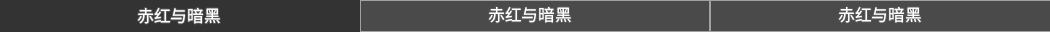
<style>
.page{position:relative;width:1050px;height:32px;background:#4a4a4a}
.page>*{position:absolute;margin:0}
.t1{font:16.7px "SourceHanSansSC-Normal";color:#ffffff}
</style>
<div class="page">
<p class="t1" style="left:137px;top:8px;width:83px;height:16px">赤红与暗黑</p>
<p class="t1" style="left:488px;top:7px;width:83px;height:16px">赤红与暗黑</p>
<p class="t1" style="left:838px;top:7px;width:83px;height:16px">赤红与暗黑</p>
</div>
